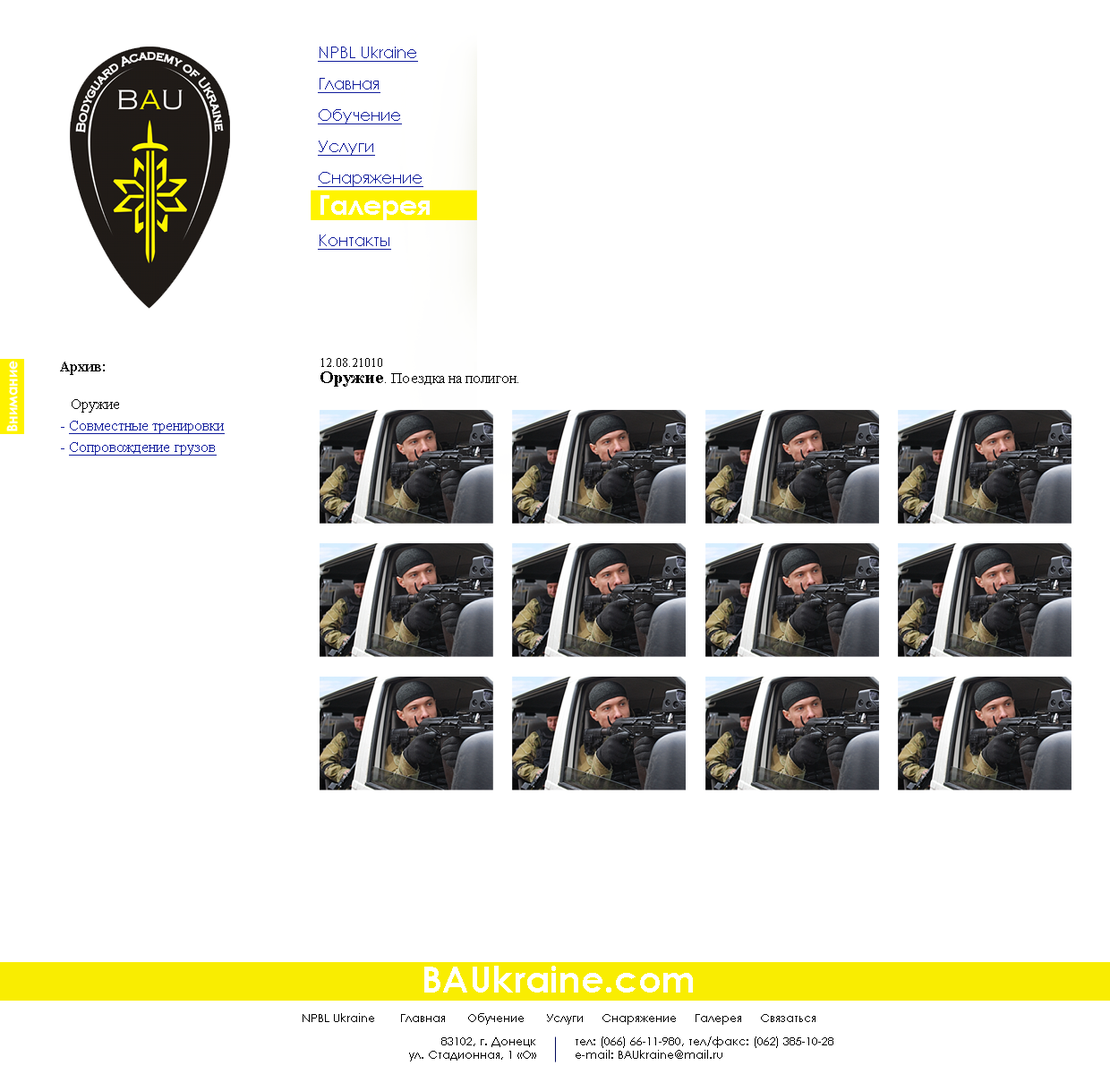
<style>
.page{position:relative;width:1110px;height:1074px;background:#ffffff}
.page>*{position:absolute;margin:0}
.t1{font:16.1px/31.3px "CenturyGothic";color:#111d9c;text-decoration:underline}
.t2{font:27.8px/31.3px "CenturyGothic-Bold";color:#ffffff}
.t3{font:14.3px "CenturyGothic-Bold";color:#ffffff}
.t4{font:15.2px/21.5px "TimesNewRomanPSMT";color:#111d9c;text-decoration:underline}
.t5{font:15.2px/16.1px "TimesNewRomanPS-BoldMT";color:#000000}
.t6{font:15.2px/21.5px "TimesNewRomanPSMT";color:#000000}
.t7{font:15.2px/21.5px "TimesNewRomanPSMT";color:#111d9c}
.t8{font:15.2px/16.1px "TimesNewRomanPSMT";color:#000000}
.t9{font:12.5px/16.1px "TimesNewRomanPSMT";color:#000000}
.t10{font:17.9px/16.1px "TimesNewRomanPS-BoldMT";color:#000000}
.t11{font:36.7px "CenturyGothic-Bold";color:#ffffff}
.t12{font:11.6px "CenturyGothic";color:#000000}
</style>
<div class="page">
<p class="t1" style="left:318px;top:47px;width:112px;height:203px">NPBL Ukraine<br>Главная<br>Обучение<br>Услуги<br>Снаряжение<br><span class="t2">Галерея<br></span>Контакты</p>
<p class="t3" style="left:6px;top:361px;width:12px;height:70px;rotate:-90deg">Внимание</p>
<p class="t4" style="left:60px;top:362px;width:165px;height:94px;text-align:justify"><span class="t5">Архив:<br><br>   </span><span class="t6">Оружие<br></span><span class="t7">- </span>Совместные тренировки<br><span class="t7">- </span>Сопровождение грузов</p>
<p class="t8" style="left:320px;top:358px;width:198px;height:29px;text-align:justify"><span class="t9">12.08.21010<br></span><span class="t10">Оружие</span>. Поездка на полигон.</p>
<p class="t11" style="left:424px;top:966px;width:269px;height:27px">BAUkraine.com</p>
<p class="t12" style="left:303px;top:1013px;width:513px;height:12px">NPBL Ukraine       Главная      Обучение      Услуги     Снаряжение     Галерея     Связаться</p>
<p class="t12" style="left:409px;top:1038px;width:127px;height:24px;text-align:right">83102, г. Донецк<br>ул. Стадионная, 1 «О»</p>
<p class="t12" style="left:576px;top:1037px;width:257px;height:22px">тел: (066) 66-11-980, тел/факс: (062) 385-10-28<br>e-mail: BAUkraine@mail.ru</p>
</div>
